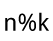
<style>
.page{position:relative;width:53px;height:41px;background:#ffffff}
.page>*{position:absolute;margin:0}
.t1{font:23.7px "DroidSans";color:#000000}
</style>
<div class="page">
<p class="t1" style="left:5px;top:12px;width:44px;height:19px">n%k</p>
</div>
